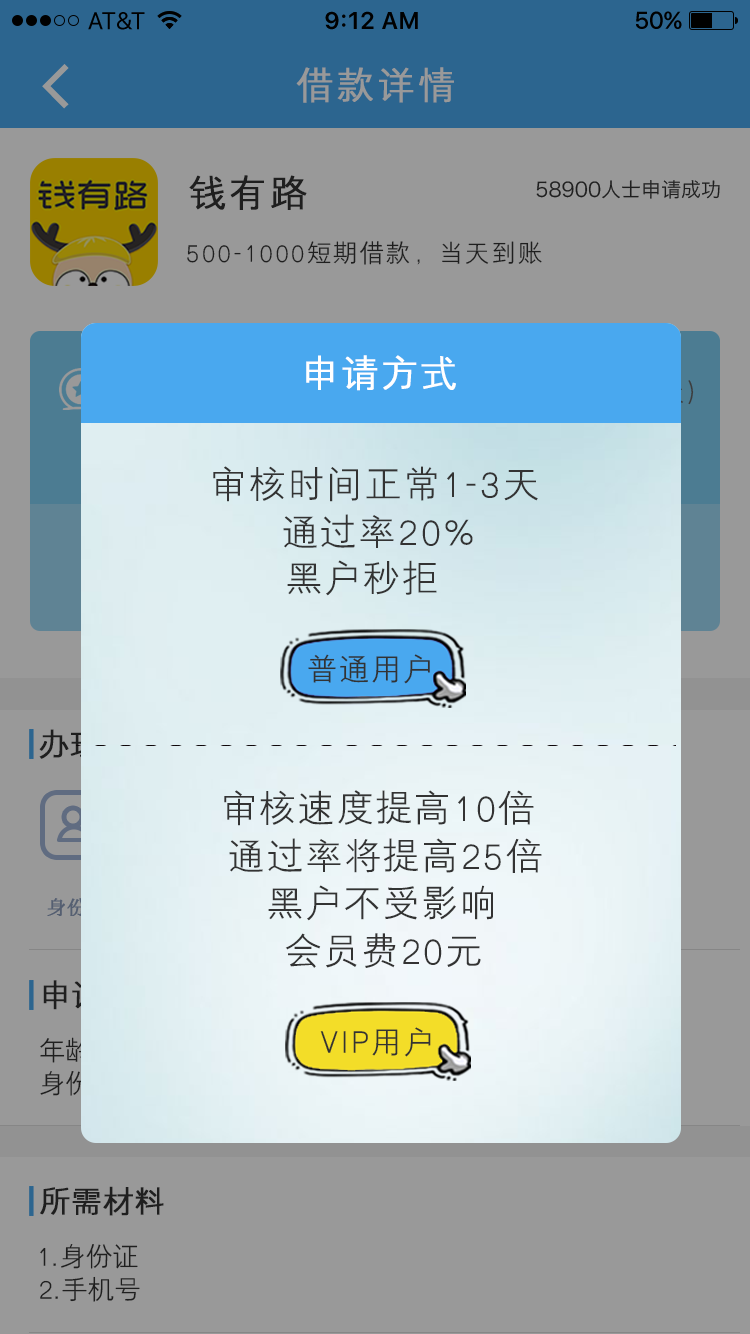
<style>
.page{position:relative;width:750px;height:1334px;background:#999999}
.page>*{position:absolute;margin:0}
.t1{font:36px "HYZhongJianHeiJ";letter-spacing:0.075em;color:#ffffff;font-weight:bold}
.t2{font:36px "HYZhongJianHeiJ";letter-spacing:0.075em;color:#333333}
.t3{font:30px "HYZhongJianHeiJ";letter-spacing:0.075em;color:#333333}
</style>
<div class="page">
<p class="t1" style="left:306px;top:355px;width:150px;height:36px">申请方式</p>
<p class="t2" style="left:213px;top:466px;width:325px;height:36px">审核时间正常1-3天</p>
<p class="t2" style="left:283px;top:514px;width:190px;height:34px">通过率20%</p>
<p class="t2" style="left:287px;top:560px;width:150px;height:36px">黑户秒拒</p>
<p class="t3" style="left:308px;top:654px;width:122px;height:30px">普通用户</p>
<p class="t2" style="left:224px;top:790px;width:310px;height:36px">审核速度提高10倍</p>
<p class="t2" style="left:229px;top:838px;width:313px;height:35px">通过率将提高25倍</p>
<p class="t2" style="left:268px;top:885px;width:225px;height:36px">黑户不受影响</p>
<p class="t2" style="left:285px;top:933px;width:196px;height:35px">会员费20元</p>
<p class="t3" style="left:320px;top:1027px;width:111px;height:30px">VIP用户</p>
</div>
